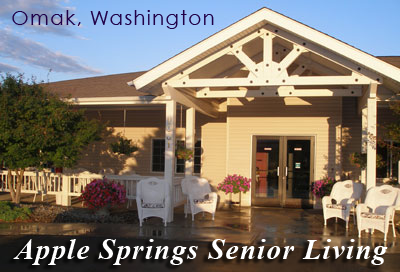
<style>
.page{position:relative;width:400px;height:272px}
.page>*{position:absolute;margin:0}
.t1{font:20.4px "CenturyGothic";letter-spacing:0.05em;color:#200048}
.t2{font:28.6px "TimesNewRomanPS-BoldItalicMT";letter-spacing:0.05em;color:#ffffff}
</style>
<div class="page">
<p class="t1" style="left:12px;top:10px;width:202px;height:19px">Omak, Washington</p>
<p class="t2" style="left:13px;top:239px;width:375px;height:26px">Apple Springs Senior Living</p>
</div>
